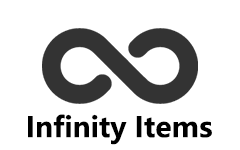
<style>
.page{position:relative;width:240px;height:150px;background:#ffffff}
.page>*{position:absolute;margin:0}
.t1{font:27.8px "MicrosoftYaHei-Bold";color:#000000}
</style>
<div class="page">
<p class="t1" style="left:28px;top:114px;width:184px;height:31px">Infinity Items</p>
</div>
